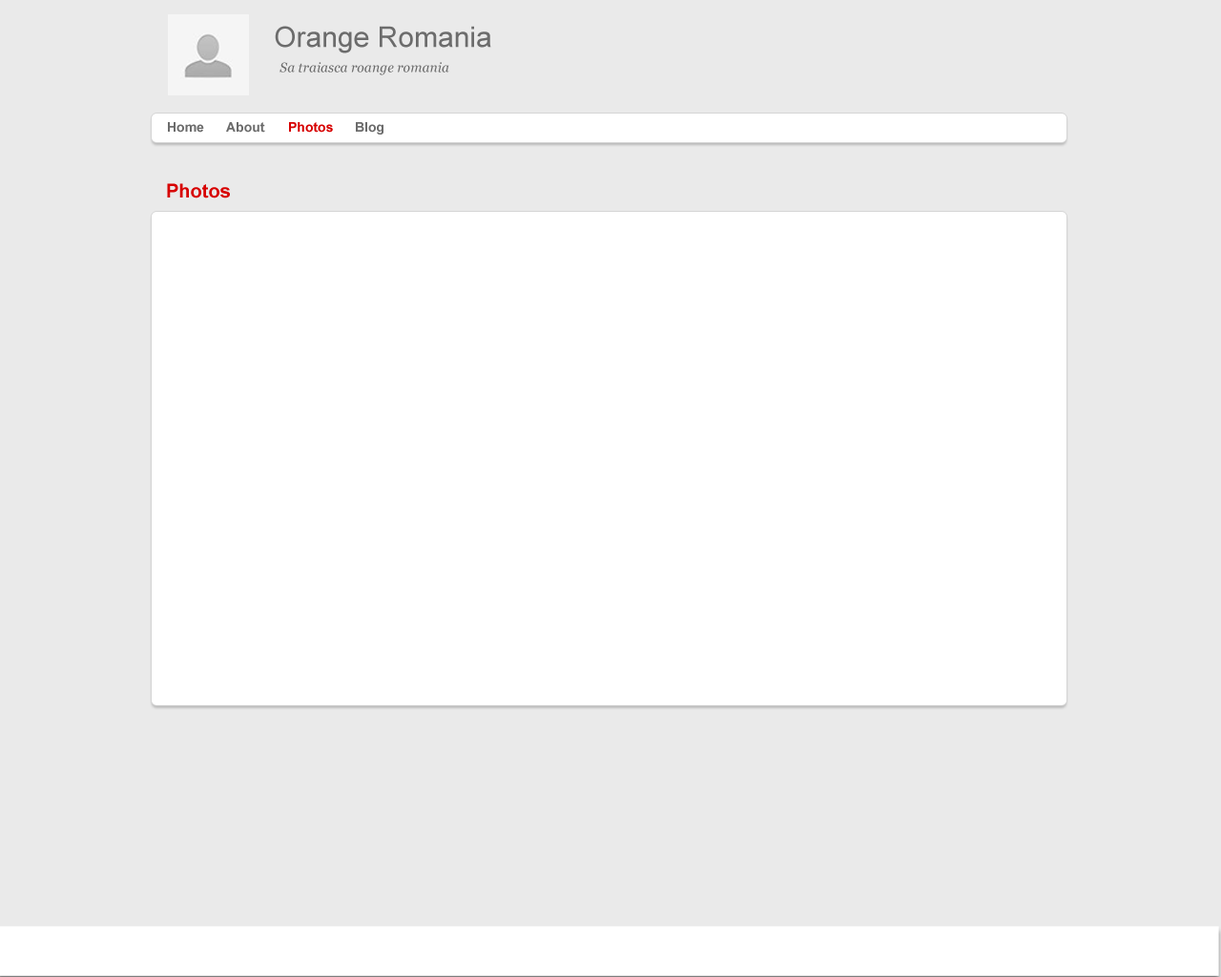
<style>
.page{position:relative;width:1221px;height:977px;background:#eaeaea}
.page>*{position:absolute;margin:0}
.t1{font:28.6px "ArialMT";color:#6c6c6c}
.t2{font:13.4px "Georgia-Italic";color:#6c6c6c}
.t3{font:13.4px "Arial-BoldMT";color:#6c6c6c}
.t4{font:13.4px "Arial-BoldMT";color:#d70000}
.t5{font:19.1px "Arial-BoldMT";color:#d70000}
</style>
<div class="page">
<p class="t1" style="left:275px;top:26px;width:216px;height:27px">Orange Romania</p>
<p class="t2" style="left:279px;top:62px;width:170px;height:13px">Sa traiasca roange romania</p>
<p class="t3" style="left:168px;top:122px;width:36px;height:11px">Home</p>
<p class="t3" style="left:226px;top:122px;width:39px;height:11px">About</p>
<p class="t4" style="left:289px;top:122px;width:44px;height:11px">Photos</p>
<p class="t3" style="left:356px;top:122px;width:27px;height:12px">Blog</p>
<p class="t5" style="left:167px;top:183px;width:63px;height:15px">Photos</p>
</div>
